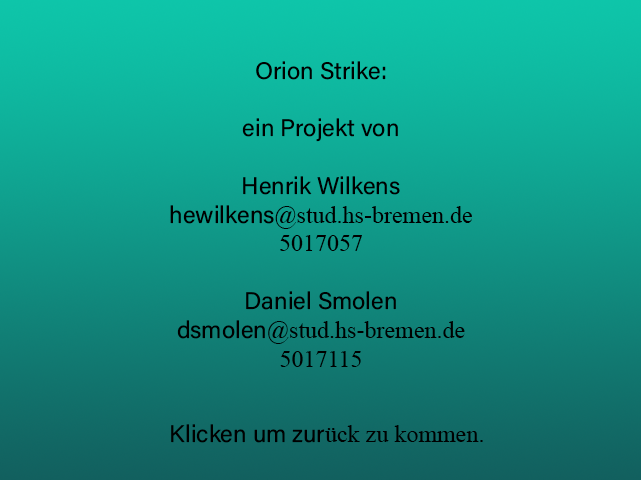
<style>
.page{position:relative;width:641px;height:480px}
.page>*{position:absolute;margin:0}
.t1{font:24px "AcuminConcept-Regular";color:#000000}
.t2{font:24px "TimesNewRomanPSMT";color:#000000}
</style>
<div class="page">
<p class="t1" style="left:170px;top:61px;width:302px;height:306px;text-align:center">Orion Strike: <br><br>ein Projekt von <br><br>Henrik Wilkens <br>hewilkens<span class="t2">@stud.hs-bremen.de<br>5017057<br><br></span>Daniel Smolen<br>dsmolen<span class="t2">@stud.hs-bremen.de<br>5017115</span></p>
<p class="t1" style="left:171px;top:424px;width:312px;height:19px">Klicken um zur<span class="t2">ück zu kommen.</span></p>
</div>
